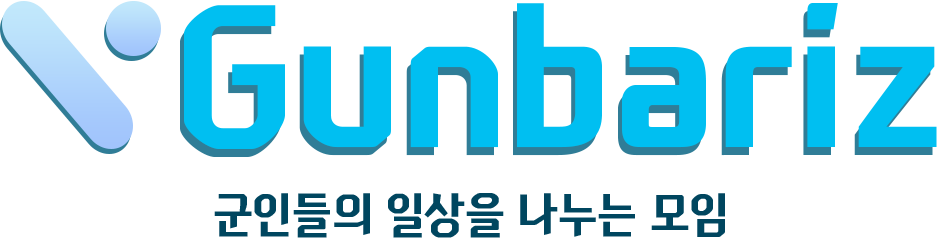
<style>
.page{position:relative;width:939px;height:240px;background:#ffffff}
.page>*{position:absolute;margin:0}
.t1{font:195.2px "NEXONFootballGothicB";color:#00c0f1}
.t2{font:47.9px "NEXONFootballGothicB";color:#00465f}
</style>
<div class="page">
<p class="t1" style="left:184px;top:3px;width:753px;height:146px">Gunbariz</p>
<p class="t2" style="left:214px;top:193px;width:511px;height:45px">군인들의 일상을 나누는 모임</p>
</div>
